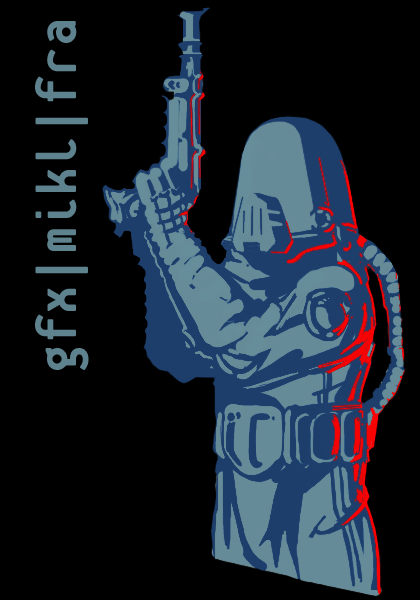
<style>
.page{position:relative;width:420px;height:600px;background:#000000}
.page>*{position:absolute;margin:0}
.t1{font:61px "PlateletHeavy";letter-spacing:0.025em;color:#5e838f}
</style>
<div class="page">
<p class="t1" style="left:35px;top:21px;width:54px;height:349px;rotate:-90deg">gfx|mikl|fra</p>
</div>
